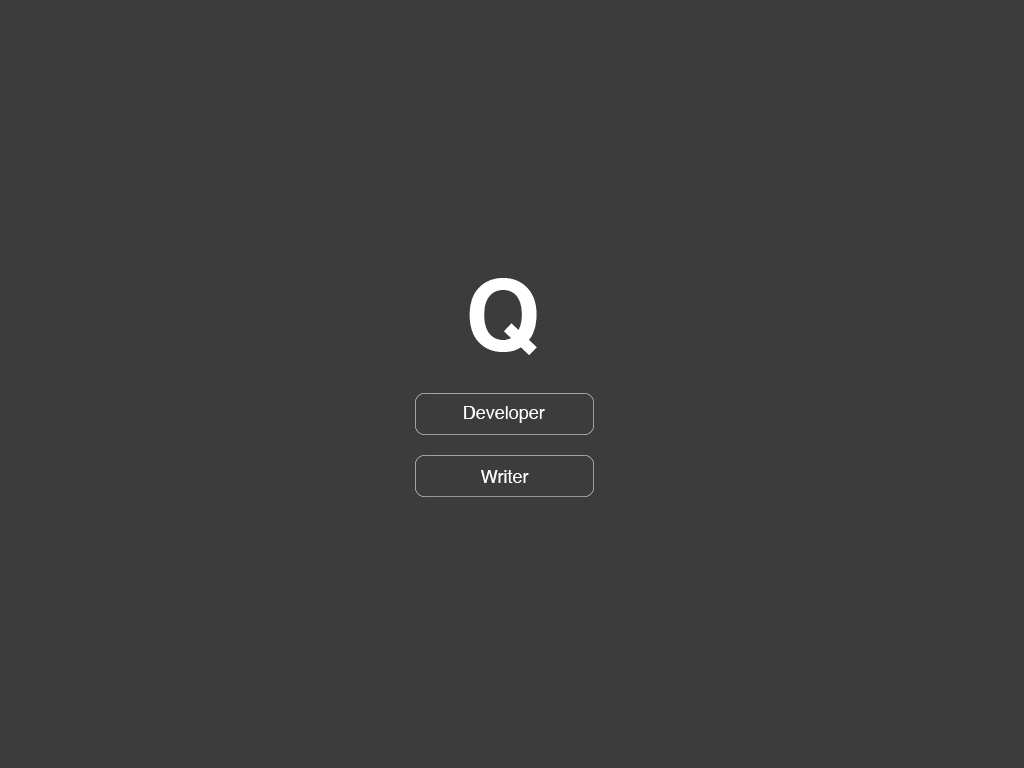
<style>
.page{position:relative;width:1024px;height:768px;background:#3c3c3c}
.page>*{position:absolute;margin:0}
.t1{font:96.7px "Helvetica-Bold";color:#ffffff}
.t2{font:18px "Helvetica";color:#ffffff}
</style>
<div class="page">
<p class="t1" style="left:469px;top:278px;width:68px;height:77px">Q</p>
<p class="t2" style="left:464px;top:406px;width:81px;height:17px">Developer</p>
<p class="t2" style="left:481px;top:470px;width:48px;height:13px">Writer</p>
</div>
